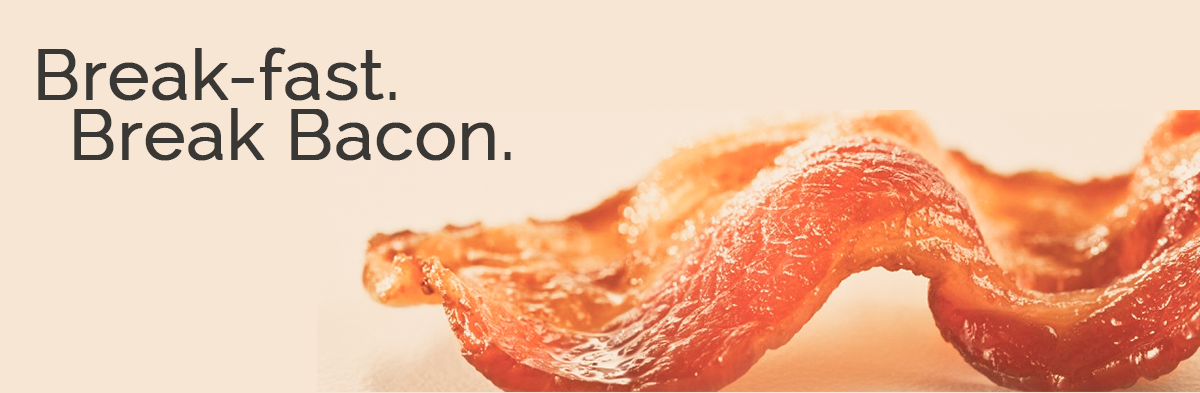
<style>
.page{position:relative;width:1200px;height:393px;background:#f7e6d4}
.page>*{position:absolute;margin:0}
.t1{font:70px/60px "Raleway";color:#3a3835;font-weight:bold}
</style>
<div class="page">
<p class="t1" style="left:38px;top:47px;width:473px;height:114px">Break-fast. <br> Break Bacon.</p>
</div>
